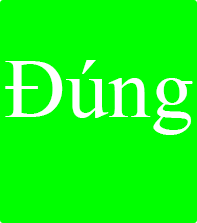
<style>
.page{position:relative;width:197px;height:223px;background:#00ff00}
.page>*{position:absolute;margin:0}
.t1{font:85px "TimesNewRomanPSMT";color:#ffffff}
</style>
<div class="page">
<p class="t1" style="left:5px;top:60px;width:188px;height:75px">Đúng</p>
</div>
